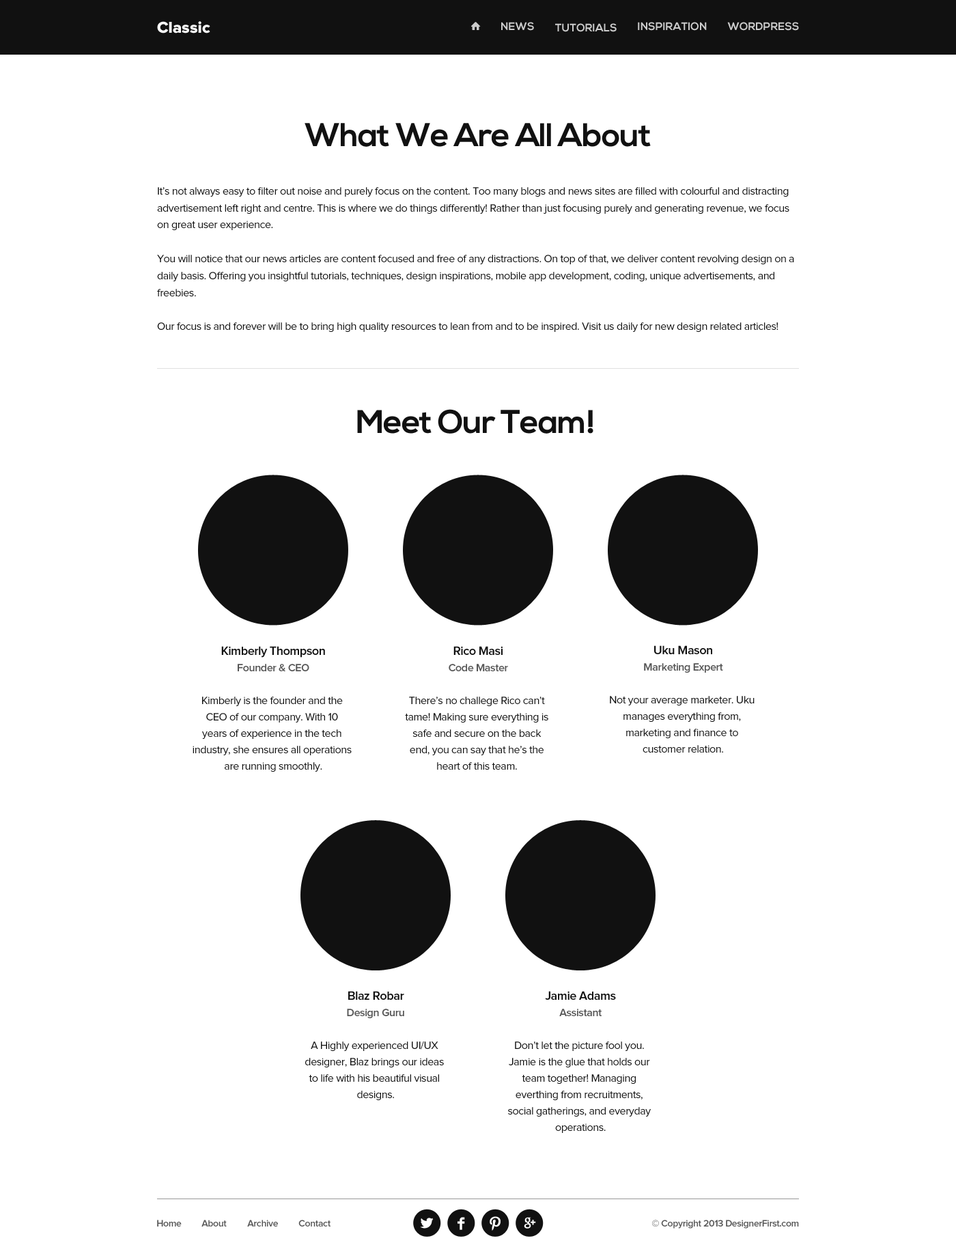
<style>
.page{position:relative;width:956px;height:1247px;background:#ffffff}
.page>*{position:absolute;margin:0}
.t1{font:16.4px "ProximaNova-Extrabld";color:#ffffff}
.t2{font:10.9px "NexaBold";color:#cccccc;text-transform:uppercase}
.t3{font:32.8px "NexaBold";letter-spacing:-0.025em;color:#111111}
.t4{font:10.9px/13.7px "ProximaNova-Regular";letter-spacing:-0.025em;color:#111111}
.t5{font:10.9px "ProximaNova-Regular";letter-spacing:-0.025em;color:#111111}
.t6{font:12.3px/34.1px "ProximaNova-Semibold";letter-spacing:-0.025em;color:#111111}
.t7{font:10.9px "ProximaNova-Semibold";letter-spacing:-0.025em;color:#555555}
.t8{font:12.3px "ProximaNova-Semibold";letter-spacing:-0.025em;color:#111111}
.t9{font:9.6px "ProximaNova-Semibold";letter-spacing:-0.025em;color:#555555}
</style>
<div class="page">
<p class="t1" style="left:157px;top:21px;width:53px;height:12px">Classic</p>
<p class="t2" style="left:501px;top:22px;width:33px;height:9px">News</p>
<p class="t2" style="left:555px;top:23px;width:62px;height:9px">tutorials</p>
<p class="t2" style="left:638px;top:22px;width:69px;height:9px">inspiration</p>
<p class="t2" style="left:727px;top:22px;width:72px;height:9px">Wordpress</p>
<p class="t3" style="left:305px;top:123px;width:346px;height:24px">What We Are All About</p>
<p class="t4" style="left:157px;top:187px;width:637px;height:145px">It’s not always easy to filter out noise and purely focus on the content. Too many blogs and news sites are filled with colourful and distracting <br>advertisement left right and centre. This is where we do things differently! Rather than just focusing purely and generating revenue, we focus <br>on great user experience.<br><br>You will notice that our news articles are content focused and free of any distractions. On top of that, we deliver content revolving design on a <br>daily basis. Offering you insightful tutorials, techniques, design inspirations, mobile app development, coding, unique advertisements, and <br>freebies.<br><br>Our focus is and forever will be to bring high quality resources to lean from and to be inspired. Visit us daily for new design related articles!</p>
<p class="t3" style="left:357px;top:409px;width:237px;height:25px">Meet Our Team!</p>
<p class="t5" style="left:193px;top:646px;width:159px;height:126px;text-align:center"><span class="t6">Kimberly Thompson<br></span><span class="t7">Founder &amp; CEO<br></span><br>Kimberly is the founder and the <br>CEO of our company. With 10 <br>years of experience in the tech <br>industry, she ensures all operations <br>are running smoothly.</p>
<p class="t5" style="left:405px;top:646px;width:143px;height:124px;text-align:center"><span class="t6">Rico Masi<br></span><span class="t7">Code Master<br><br></span>There’s no challege Rico can’t <br>tame! Making sure everything is <br>safe and secure on the back <br>end, you can say that he’s the <br>heart of this team.</p>
<p class="t5" style="left:610px;top:645px;width:145px;height:108px;text-align:center"><span class="t6">Uku Mason<br></span><span class="t7">Marketing Expert<br><br></span>Not your average marketer. Uku <br>manages everything from, <br>marketing and finance to <br>customer relation.</p>
<p class="t5" style="left:305px;top:991px;width:139px;height:109px;text-align:center"><span class="t6">Blaz Robar<br></span><span class="t7">Design Guru<br></span> <br>A Highly experienced UI/UX <br>designer, Blaz brings our ideas <br>to life with his beautiful visual <br>designs.</p>
<p class="t5" style="left:508px;top:991px;width:143px;height:142px;text-align:center"><span class="t8">Jamie Adams<br></span><span class="t7">Assistant<br></span><br>Don’t let the picture fool you. <br>Jamie is the glue that holds our <br>team together! Managing <br>everthing from recruitments, <br>social gatherings, and everyday <br>operations.</p>
<p class="t9" style="left:157px;top:1220px;width:25px;height:7px">Home</p>
<p class="t9" style="left:201px;top:1220px;width:26px;height:7px">About</p>
<p class="t9" style="left:247px;top:1220px;width:31px;height:7px">Archive</p>
<p class="t9" style="left:298px;top:1220px;width:33px;height:7px">Contact</p>
<p class="t9" style="left:652px;top:1220px;width:147px;height:9px">© Copyright 2013 DesignerFirst.com</p>
</div>
